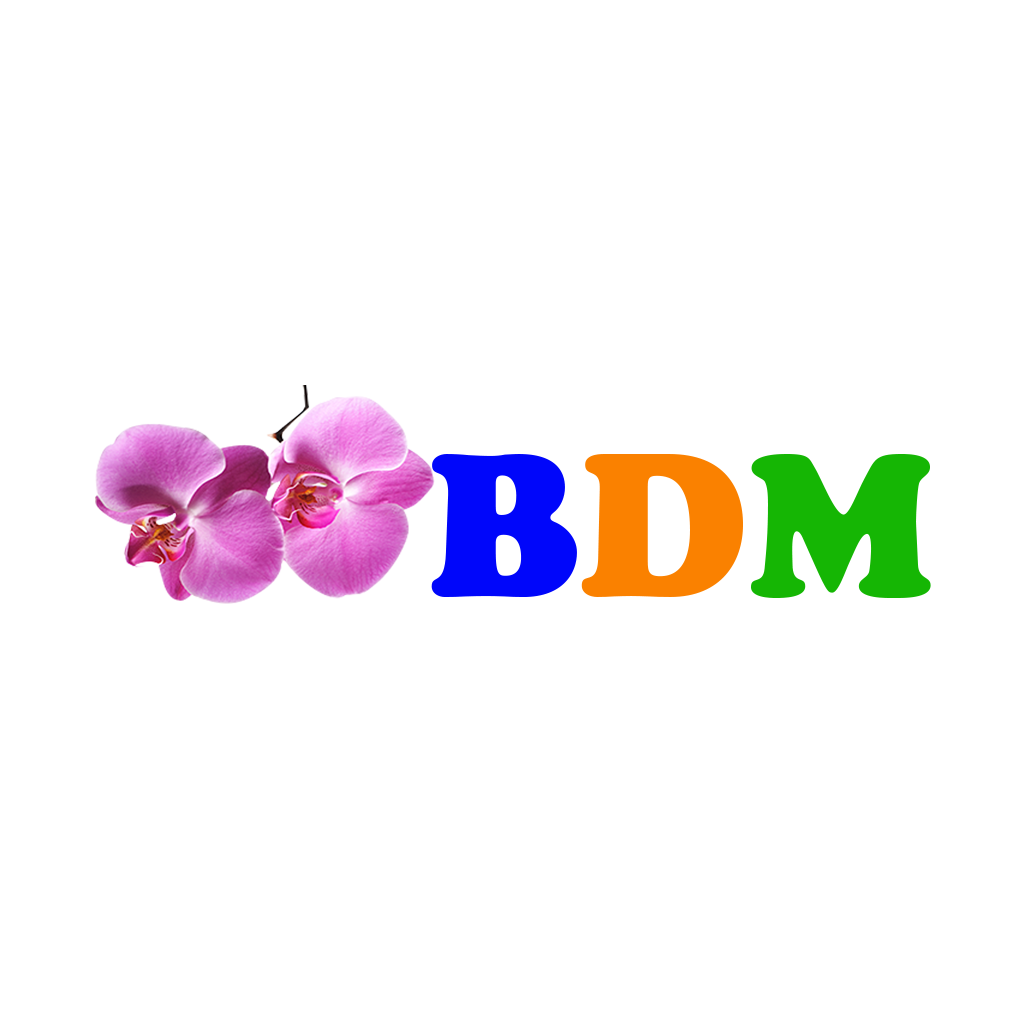
<style>
.page{position:relative;width:1024px;height:1024px;background:#ffffff}
.page>*{position:absolute;margin:0}
.t1{font:200px "CooperBlackStd";color:#0006fa}
.t2{font:200px "CooperBlackStd";color:#fa8100}
.t3{font:200px "CooperBlackStd";color:#15b604}
</style>
<div class="page">
<p class="t1" style="left:431px;top:454px;width:500px;height:144px">B<span class="t2">D</span><span class="t3">M</span></p>
</div>
